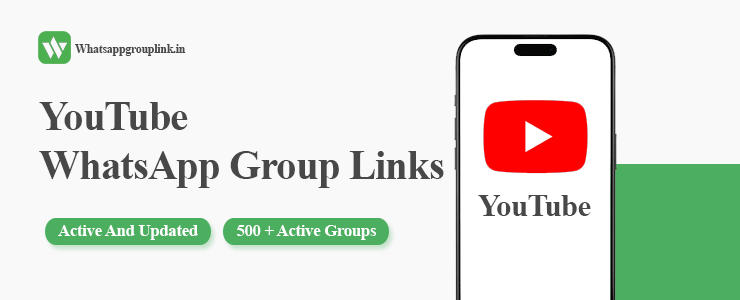
<style>
.page{position:relative;width:740px;height:300px;background:#f9f9f9}
.page>*{position:absolute;margin:0}
.t1{font:12px "TimesNewRomanPS-BoldMT";letter-spacing:-0.025em;color:#484848}
.t2{font:41px "TimesNewRomanPS-BoldMT";letter-spacing:-0.025em;color:#484848}
.t3{font:31px "TimesNewRomanPS-BoldMT";letter-spacing:-0.025em;color:#484848}
.t4{font:17px "TimesNewRomanPS-BoldMT";letter-spacing:-0.025em;color:#ffffff}
</style>
<div class="page">
<p class="t1" style="left:75px;top:44px;width:111px;height:12px">Whatsappgrouplink.in</p>
<p class="t2" style="left:39px;top:102px;width:405px;height:86px">YouTube<br>WhatsApp Group Links</p>
<p class="t3" style="left:478px;top:195px;width:113px;height:21px">YouTube</p>
<p class="t4" style="left:58px;top:225px;width:140px;height:15px">Active And Updated</p>
<p class="t4" style="left:237px;top:225px;width:139px;height:15px">500 + Active Groups</p>
</div>
